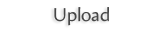
<style>
.page{position:relative;width:164px;height:32px;background:#ffffff}
.page>*{position:absolute;margin:0}
.t1{font:18.7px "Amira-Roman";color:#474747}
</style>
<div class="page">
<p class="t1" style="left:54px;top:7px;width:55px;height:19px">Upload</p>
</div>
